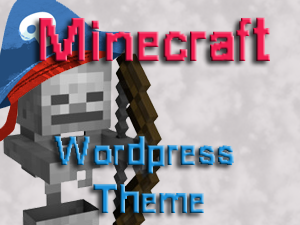
<style>
.page{position:relative;width:300px;height:225px}
.page>*{position:absolute;margin:0}
.t1{font:60px "8-bit"}
.t2{font:40px "8-bit"}
</style>
<div class="page">
<p class="t1" style="left:39px;top:17px;width:231px;height:44px">Minecraft</p>
<p class="t2" style="left:54px;top:136px;width:180px;height:77px;text-align:center">Wordpress <br>Theme</p>
</div>
